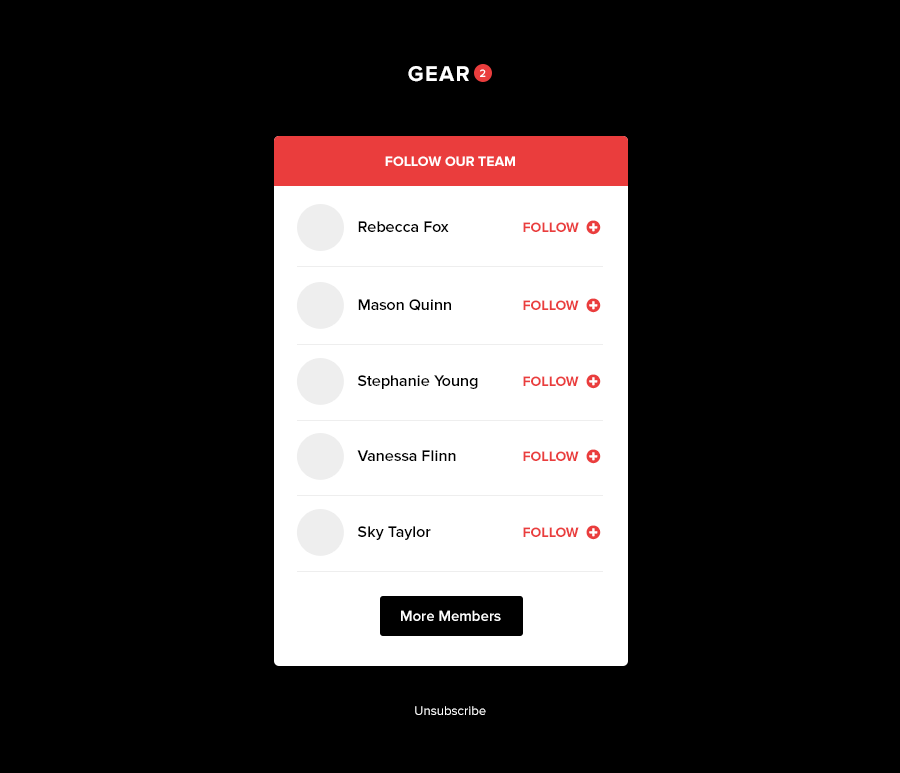
<style>
.page{position:relative;width:900px;height:773px;background:#000000}
.page>*{position:absolute;margin:0}
.t1{font:22px "ProximaNova-Bold";letter-spacing:0.06em;color:#ffffff;text-transform:uppercase}
.t2{font:11px "ProximaNova-Semibold";color:#fffefe}
.t3{font:14px "ProximaNova-Bold";color:#ffffff;text-transform:uppercase}
.t4{font:16px "ProximaNova-Semibold";color:#000000}
.t5{font:14px "ProximaNova-Bold";color:#ea3d3d}
.t6{font:15.9px "ProximaNova-Semibold";color:#000000}
.t7{font:15px "ProximaNova-Semibold";color:#ffffff}
.t8{font:13.1px "ProximaNova-Regular";color:#ffffff}
</style>
<div class="page">
<p class="t1" style="left:408px;top:66px;width:61px;height:16px">Gear</p>
<p class="t2" style="left:480px;top:69px;width:6px;height:8px">2</p>
<p class="t3" style="left:385px;top:156px;width:130px;height:10px">follow our team</p>
<p class="t4" style="left:358px;top:221px;width:91px;height:11px">Rebecca Fox</p>
<p class="t5" style="left:523px;top:222px;width:56px;height:10px">FOLLOW</p>
<p class="t6" style="left:358px;top:299px;width:93px;height:12px">Mason Quinn</p>
<p class="t5" style="left:523px;top:300px;width:56px;height:10px">FOLLOW</p>
<p class="t6" style="left:358px;top:375px;width:120px;height:14px">Stephanie Young</p>
<p class="t5" style="left:523px;top:376px;width:56px;height:10px">FOLLOW</p>
<p class="t6" style="left:357px;top:450px;width:99px;height:11px">Vanessa Flinn</p>
<p class="t5" style="left:523px;top:451px;width:56px;height:10px">FOLLOW</p>
<p class="t6" style="left:358px;top:526px;width:73px;height:14px">Sky Taylor</p>
<p class="t5" style="left:523px;top:527px;width:56px;height:10px">FOLLOW</p>
<p class="t7" style="left:401px;top:610px;width:100px;height:11px">More Members</p>
<p class="t8" style="left:415px;top:706px;width:71px;height:9px">Unsubscribe</p>
</div>
